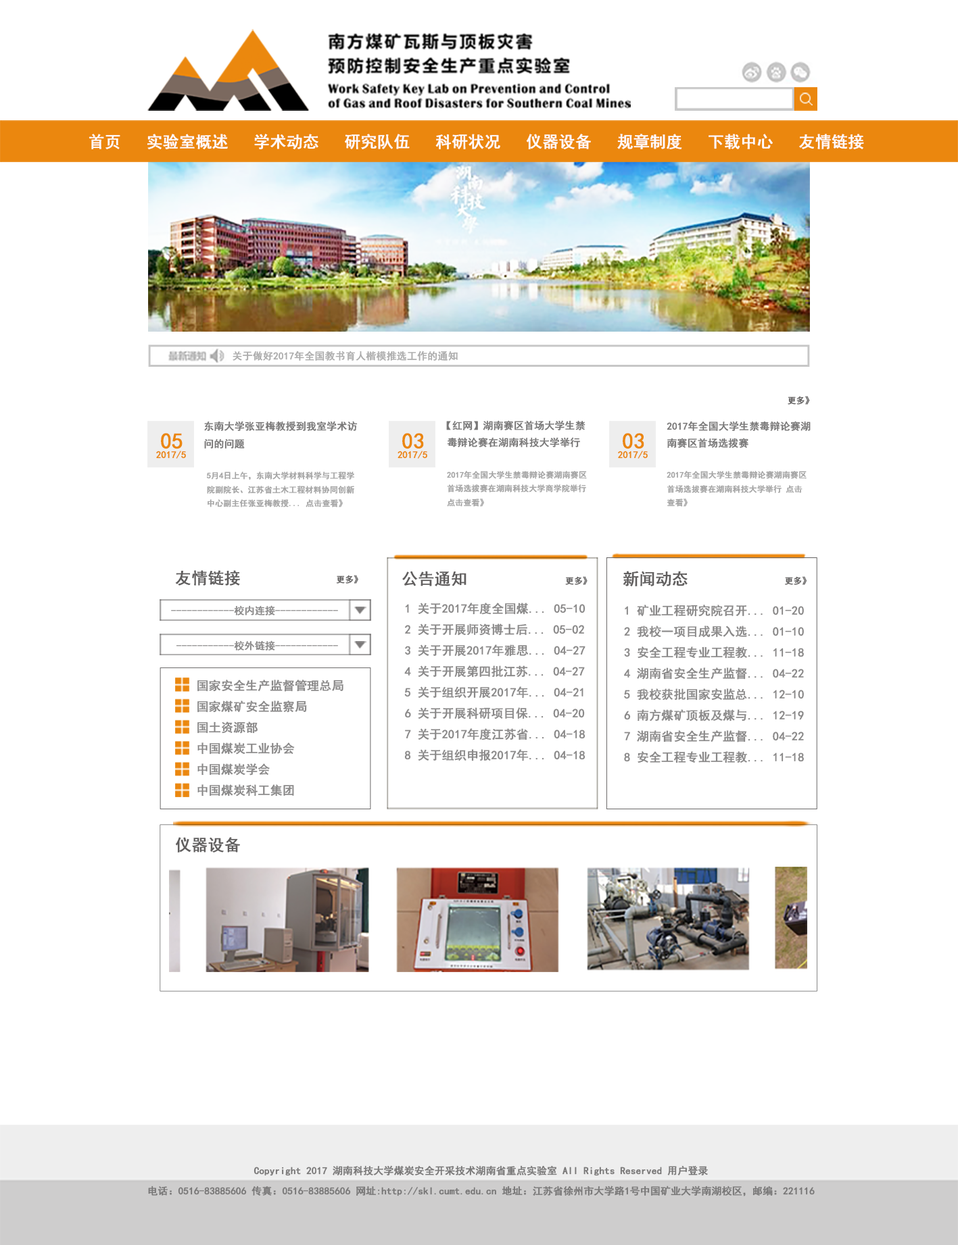
<style>
.page{position:relative;width:958px;height:1245px;background:#ffffff}
.page>*{position:absolute;margin:0}
.t1{font:16px "SimHei";color:#fffcfc;font-weight:bold}
.t2{font:10px "SimHei";color:#acacac;font-weight:bold}
.t3{font:8.5px "SimHei";color:#605e5e;font-weight:bold}
.t4{font:10px "SimHei";color:#787777;font-weight:bold}
.t5{font:22px "SimHei";color:#eb870e;font-weight:bold}
.t6{font:9.5px "SimHei";color:#eb870e;font-weight:bold}
.t7{font:8px "SimHei";color:#a3a3a3;font-weight:bold}
.t8{font:16px "SimHei";color:#605e5e;font-weight:bold}
.t9{font:10px "SimHei";color:#898888;font-weight:bold}
.t10{font:12px "SimHei";color:#898888;font-weight:bold}
.t11{font:9.9px/9.9px "SimHei";color:#787777;font-weight:bold}
</style>
<div class="page">
<p class="t1" style="left:89px;top:134px;width:775px;height:15px">首页   实验室概述   学术动态   研究队伍   科研状况   仪器设备   规章制度   下载中心   友情链接</p>
<p class="t2" style="left:232px;top:351px;width:225px;height:10px">关于做好2017年全国教书育人楷模推选工作的通知</p>
<p class="t3" style="left:787px;top:396px;width:23px;height:9px">更多》</p>
<p class="t4" style="left:204px;top:421px;width:153px;height:28px">东南大学张亚梅教授到我室学术访<br>问的问题</p>
<p class="t4" style="left:446px;top:420px;width:139px;height:27px;text-align:center">【红网】湖南赛区首场大学生禁<br>毒辩论赛在湖南科技大学举行</p>
<p class="t4" style="left:666px;top:421px;width:144px;height:27px">2017年全国大学生禁毒辩论赛湖<br>南赛区首场选拨赛</p>
<p class="t5" style="left:161px;top:433px;width:21px;height:16px">05</p>
<p class="t5" style="left:402px;top:433px;width:22px;height:16px">03</p>
<p class="t5" style="left:622px;top:433px;width:22px;height:16px">03</p>
<p class="t6" style="left:156px;top:451px;width:30px;height:8px">2017/5</p>
<p class="t6" style="left:397px;top:451px;width:30px;height:8px">2017/5</p>
<p class="t6" style="left:618px;top:451px;width:29px;height:8px">2017/5</p>
<p class="t7" style="left:206px;top:472px;width:148px;height:35px">5月4日上午，东南大学材料科学与工程学<br>院副院长、江苏省土木工程材料协同创新<br>中心副主任张亚梅教授... 点击查看》</p>
<p class="t7" style="left:447px;top:471px;width:140px;height:36px">2017年全国大学生禁毒辩论赛湖南赛区<br>首场选拨赛在湖南科技大学商学院举行 <br>点击查看》</p>
<p class="t7" style="left:666px;top:471px;width:140px;height:36px">2017年全国大学生禁毒辩论赛湖南赛区<br>首场选拔赛在湖南科技大学举行 点击<br>查看》</p>
<p class="t8" style="left:175px;top:570px;width:65px;height:16px">友情链接</p>
<p class="t3" style="left:336px;top:575px;width:22px;height:9px">更多》</p>
<p class="t8" style="left:402px;top:571px;width:64px;height:16px">公告通知</p>
<p class="t3" style="left:565px;top:576px;width:22px;height:9px">更多》</p>
<p class="t8" style="left:622px;top:571px;width:65px;height:16px">新闻动态</p>
<p class="t3" style="left:785px;top:576px;width:22px;height:9px">更多》</p>
<p class="t9" style="left:171px;top:605px;width:167px;height:46px">------------校内连接------------<br> <br>   -----------校外链接------------</p>
<p class="t10" style="left:404px;top:603px;width:181px;height:159px">1 关于2017年度全国煤... 05-10 <br>2 关于开展师资博士后... 05-02 <br>3 关于开展2017年雅思... 04-27 <br>4 关于开展第四批江苏... 04-27<br>5 关于组织开展2017年... 04-21 <br>6 关于开展科研项目保... 04-20 <br>7 关于2017年度江苏省... 04-18 <br>8 关于组织申报2017年... 04-18</p>
<p class="t10" style="left:624px;top:605px;width:179px;height:159px">1 矿业工程研究院召开... 01-20 <br>2 我校一项目成果入选... 01-10 <br>3 安全工程专业工程教... 11-18 <br>4 湖南省安全生产监督... 04-22<br>5 我校获批国家安监总... 12-10 <br>6 南方煤矿顶板及煤与... 12-19<br>7 湖南省安全生产监督... 04-22<br>8 安全工程专业工程教... 11-18</p>
<p class="t10" style="left:197px;top:680px;width:146px;height:117px">国家安全生产监督管理总局 <br>国家煤矿安全监察局 <br>国土资源部 <br>中国煤炭工业协会 <br>中国煤炭学会 <br>中国煤炭科工集团</p>
<p class="t8" style="left:175px;top:837px;width:65px;height:16px">仪器设备</p>
<p class="t11" style="left:148px;top:1166px;width:666px;height:31px;text-align:center">Copyright 2017 湖南科技大学煤炭安全开采技术湖南省重点实验室 All Rights Reserved 用户登录 <br><br>电话：0516-83885606 传真：0516-83885606 网址:http://skl.cumt.edu.cn 地址：江苏省徐州市大学路1号中国矿业大学南湖校区，邮编：221116</p>
</div>
